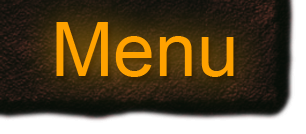
<style>
.page{position:relative;width:306px;height:134px}
.page>*{position:absolute;margin:0}
.t1{font:75px "ArialMT";color:#ffa200}
</style>
<div class="page">
<p class="t1" style="left:56px;top:22px;width:178px;height:55px">Menu</p>
</div>
